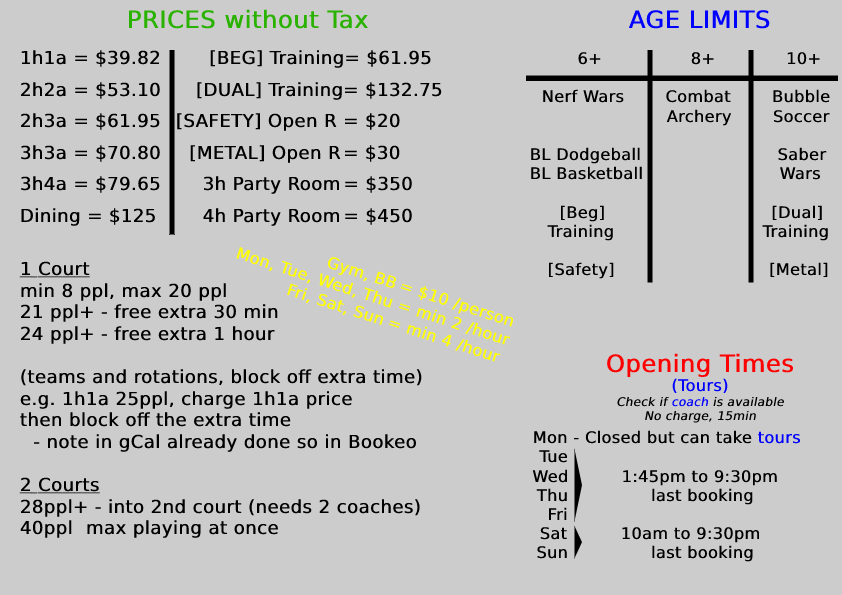
<style>
.page{position:relative;width:842px;height:595px;background:#cccccc}
.page>*{position:absolute;margin:0}
.t1{font:24px "DejaVuSans";color:#2ab200;font-weight:bold}
.t2{font:24px "DejaVuSans";color:#0000ff;font-weight:bold}
.t3{font:18px "DejaVuSans";color:#000000;font-weight:bold}
.t4{font:18px "DejaVuSans";color:#000000;font-weight:bold;text-decoration:underline}
.t5{font:16px "DejaVuSans";color:#000000;font-weight:bold}
.t6{font:16px "DejaVuSans";color:#ffff00;font-weight:bold}
.t7{font:12px "DejaVuSans";color:#000000;font-weight:bold;font-style:italic}
.t8{font:24px "DejaVuSans";color:#ff0000;font-weight:bold}
.t9{font:16px "DejaVuSans";color:#0000ff;font-weight:bold}
.t10{font:12px "DejaVuSans";color:#0000ff;font-weight:bold;font-style:italic}
.t11{font:14px "DejaVuSans";color:#ff0000;font-weight:bold;font-style:italic}
</style>
<div class="page">
<p class="t1" style="left:129px;top:9px;width:240px;height:20px">PRICES without Tax</p>
<p class="t2" style="left:629px;top:10px;width:141px;height:19px">AGE LIMITS</p>
<p class="t3" style="left:19px;top:50px;width:403px;height:488px">1h1a = $39.82<br>2h2a = $53.10<br>2h3a = $61.95<br>3h3a = $70.80<br>3h4a = $79.65<br>Dining = $125<br><br><span class="t4">1 Court<br></span>min 8 ppl, max 20 ppl<br>21 ppl+ - free extra 30 min<br>24 ppl+ - free extra 1 hour<br><br>(teams and rotations, block off extra time)<br>e.g. 1h1a 25ppl, charge 1h1a price<br>then block off the extra time<br>  - note in gCal already done so in Bookeo<br><br><span class="t4">2 Courts<br></span>28ppl+ - into 2nd court (needs 2 coaches)<br>40ppl  max playing at once</p>
<p class="t3" style="left:177px;top:50px;width:265px;height:176px">[BEG] Training = $61.95<br>   [DUAL] Training = $132.75<br>[SAFETY] Open R = $20<br>  [METAL] Open R = $30<br>    3h Party Room = $350<br>    4h Party Room = $450</p>
<p class="t5" style="left:531px;top:52px;width:299px;height:227px">6+               8+            10+<br><br>  Nerf Wars       Combat       Bubble<br>                       Archery       Soccer<br><br>BL Dodgeball                       Saber<br>BL Basketball                       Wars<br><br>     [Beg]                            [Dual]<br>   Training                         Training<br><br>   [Safety]                          [Metal]</p>
<p class="t6" style="left:236px;top:247px;width:278px;height:115px;rotate:18deg">Gym, BB = $10 /person<br>Mon, Tue, Wed, Thu = min 2 /hour<br>          Fri, Sat, Sun = min 4 /hour</p>
<p class="t7" style="left:607px;top:353px;width:187px;height:70px;text-align:center"><span class="t8">Opening Times<br></span><span class="t9">(Tours)<br></span>Check if <span class="t10">coach </span>is available<br>No charge, 15min</p>
<p class="t5" style="left:532px;top:430px;width:269px;height:132px"><span class="t11"><br> </span>Mon - Closed but can take <span class="t9">tours<br>  </span>Tue <br> Wed         1:45pm to 9:30pm<br> Thu              last booking<br>   Fri <br>  Sat          10am to 9:30pm<br>  Sun              last booking</p>
</div>
